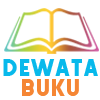
<style>
.page{position:relative;width:100px;height:100px;background:#ffffff}
.page>*{position:absolute;margin:0}
.t1{font:25.7px/20px "FeedingaMoment";letter-spacing:0.06em;color:#08b9eb;scale:1.06 1}
.t2{font:25.7px/20px "FeedingaMoment";letter-spacing:0.06em;color:#f58634;scale:1.06 1}
</style>
<div class="page">
<p class="t1" style="left:3px;top:59px;width:95px;height:37px;text-align:center">DEWATA <br><span class="t2">BUKU</span></p>
</div>
